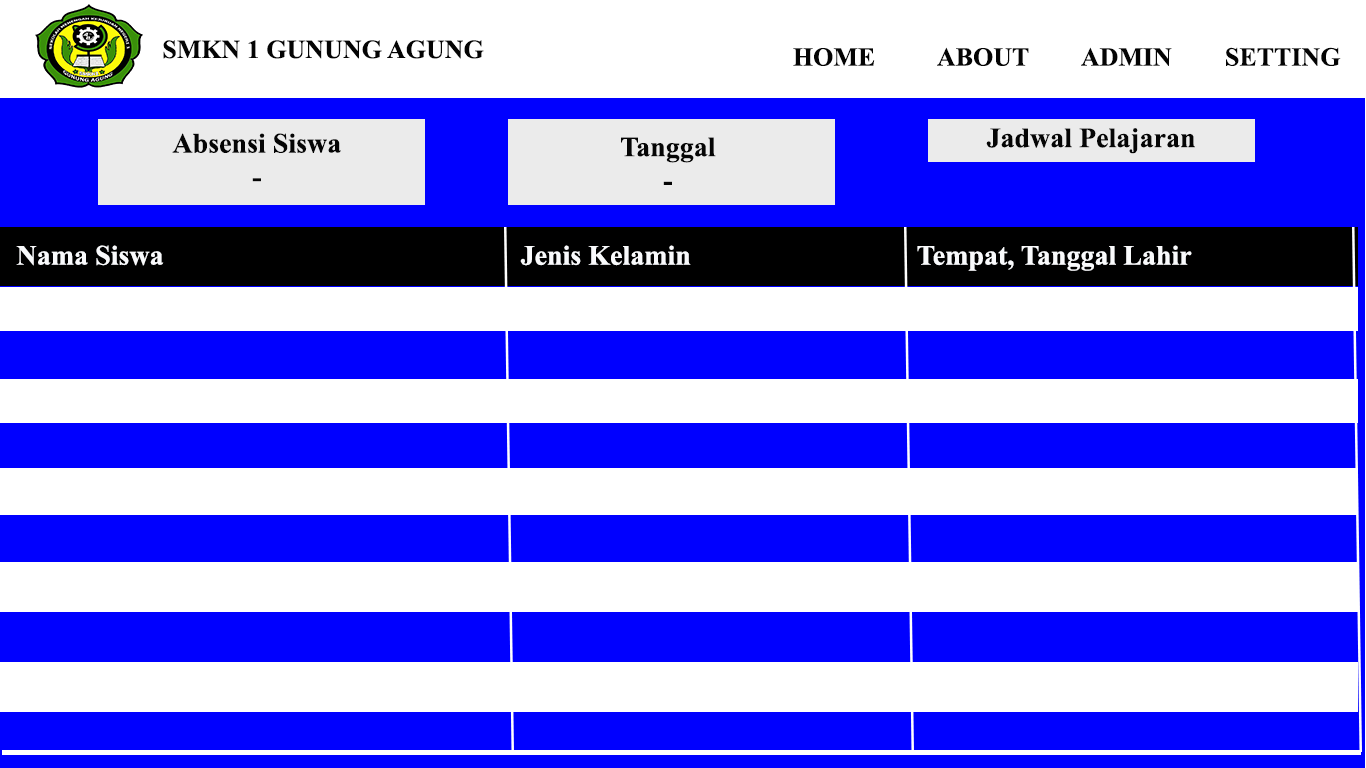
<style>
.page{position:relative;width:1366px;height:768px;background:#ffffff}
.page>*{position:absolute;margin:0}
.t1{font:26px "TimesNewRomanPS-BoldMT";color:#040404}
.t2{font:28px "TimesNewRomanPS-BoldMT";color:#050505}
.t3{font:28px "TimesNewRomanPS-BoldMT";color:#f9fafc}
</style>
<div class="page">
<p class="t1" style="left:163px;top:40px;width:321px;height:19px">SMKN 1 GUNUNG AGUNG</p>
<p class="t1" style="left:793px;top:47px;width:548px;height:19px">HOME  ABOUT  ADMIN  SETTING</p>
<p class="t2" style="left:172px;top:133px;width:169px;height:49px;text-align:center">Absensi Siswa<br>-</p>
<p class="t2" style="left:621px;top:137px;width:95px;height:48px;text-align:center">Tanggal<br>-</p>
<p class="t2" style="left:986px;top:128px;width:209px;height:26px">Jadwal Pelajaran</p>
<p class="t3" style="left:16px;top:245px;width:1176px;height:26px">Nama Siswa          Jenis Kelamin       Tempat, Tanggal Lahir</p>
</div>
